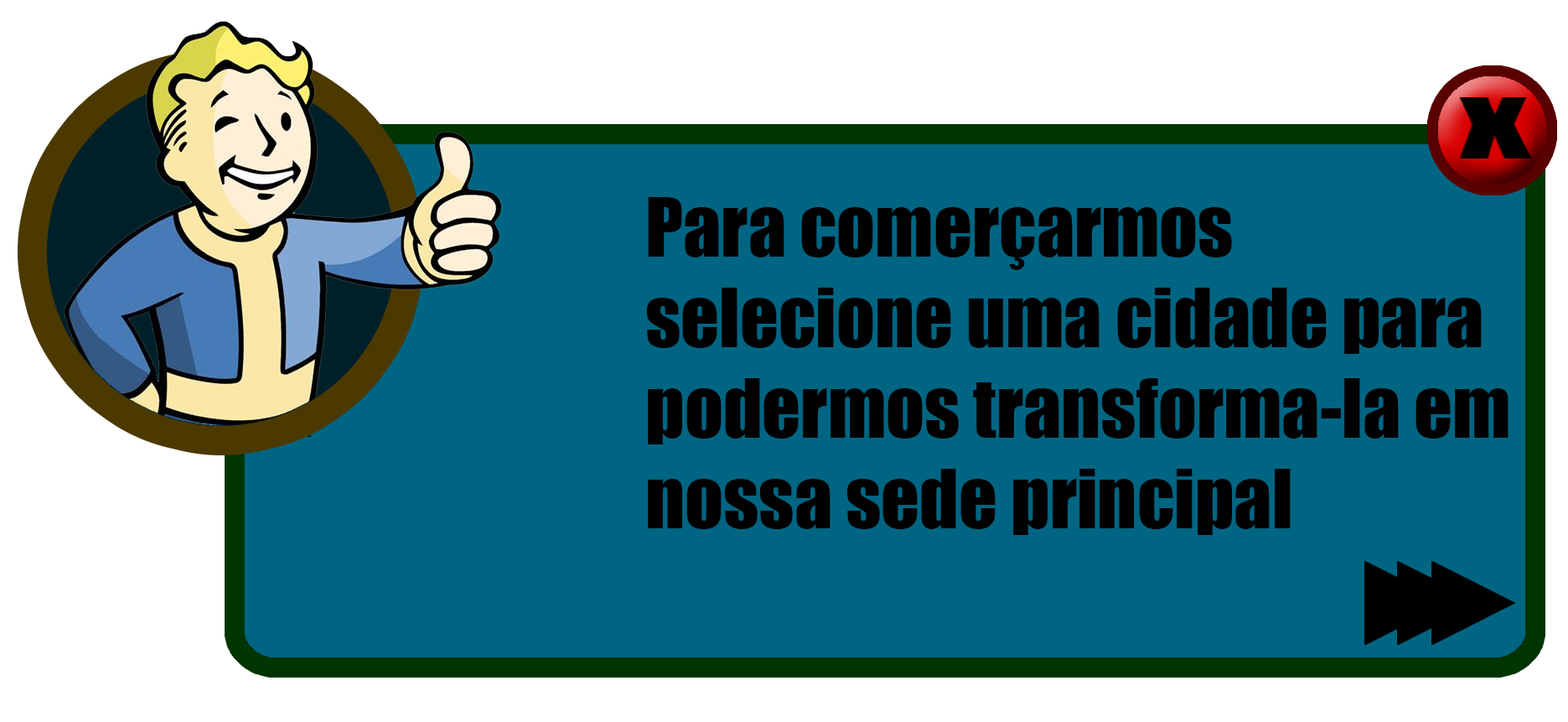
<style>
.page{position:relative;width:1568px;height:722px;background:#006582}
.page>*{position:absolute;margin:0}
.t1{font:75.4px "Impact";color:#000000}
</style>
<div class="page">
<p class="t1" style="left:646px;top:197px;width:862px;height:338px">Para comerçarmos<br>selecione uma cidade para<br>podermos transforma-la em<br>nossa sede principal</p>
</div>
